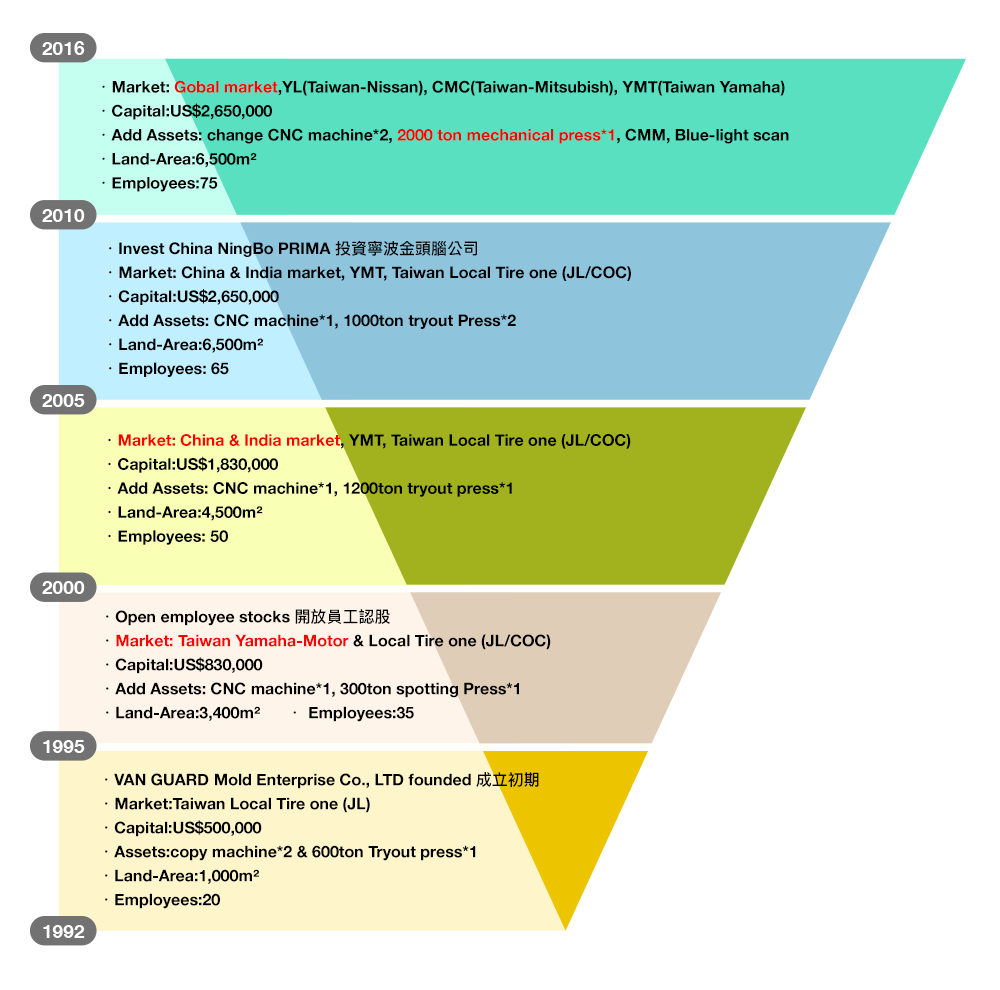
<style>
.page{position:relative;width:1000px;height:990px;background:#ffffff}
.page>*{position:absolute;margin:0}
.t1{font:16px/24px "HelveticaNeue-Bold";color:#000000}
.t2{font:16px/24px "PingFangTC-Medium";color:#000000}
.t3{font:16px/24px "HelveticaNeue-Bold";color:#ff0000}
</style>
<div class="page">
<p class="t1" style="left:102px;top:80px;width:687px;height:112px"><span class="t2">．</span>Market: <span class="t3">Gobal market</span>,YL(Taiwan-Nissan), CMC(Taiwan-Mitsubish), YMT(Taiwan Yamaha)<br><span class="t2">．</span>Capital:US$2,650,000<br><span class="t2">．</span>Add Assets: change CNC machine*2, <span class="t3">2000 ton mechanical press*1</span>, CMM, Blue-light scan<br><span class="t2">．</span>Land-Area:6,500m²<br><span class="t2">．</span>Employees:75</p>
<p class="t1" style="left:109px;top:240px;width:522px;height:137px"><span class="t2">．</span>Invest China NingBo PRIMA <span class="t2">投資寧波金頭腦公司<br>．</span>Market: China &amp; India market, YMT, Taiwan Local Tire one (JL/COC) <br><span class="t2">．</span>Capital:US$2,650,000<br><span class="t2">．</span>Add Assets: CNC machine*1, 1000ton tryout Press*2<br><span class="t2">．</span>Land-Area:6,500m²<br><span class="t2">．</span>Employees: 65</p>
<p class="t1" style="left:108px;top:434px;width:523px;height:111px"><span class="t2">．</span><span class="t3">Market: China &amp; India market</span>, YMT, Taiwan Local Tire one (JL/COC)<br><span class="t2">．</span>Capital:US$1,830,000<br><span class="t2">．</span>Add Assets: CNC machine*1, 1200ton tryout press*1<br><span class="t2">．</span>Land-Area:4,500m²<br><span class="t2">．</span>Employees: 50</p>
<p class="t1" style="left:106px;top:609px;width:445px;height:113px"><span class="t2">．</span>Open employee stocks <span class="t2">開放員工認股<br>．</span><span class="t3">Market: Taiwan Yamaha-Motor</span> &amp; Local Tire one (JL/COC)<br><span class="t2">．</span>Capital:US$830,000<br><span class="t2">．</span>Add Assets: CNC machine*1, 300ton spotting Press*1<br><span class="t2">．</span>Land-Area:3,400m²      <span class="t2">． </span>Employees:35</p>
<p class="t1" style="left:105px;top:772px;width:434px;height:137px"><span class="t2">．</span>VAN GUARD Mold Enterprise Co., LTD founded <span class="t2">成立初期<br>．</span>Market:Taiwan Local Tire one (JL)<br><span class="t2">．</span>Capital:US$500,000<br><span class="t2">．</span>Assets:copy machine*2 &amp; 600ton Tryout press*1<br><span class="t2">．</span>Land-Area:1,000m²<br><span class="t2">．</span>Employees:20</p>
</div>
